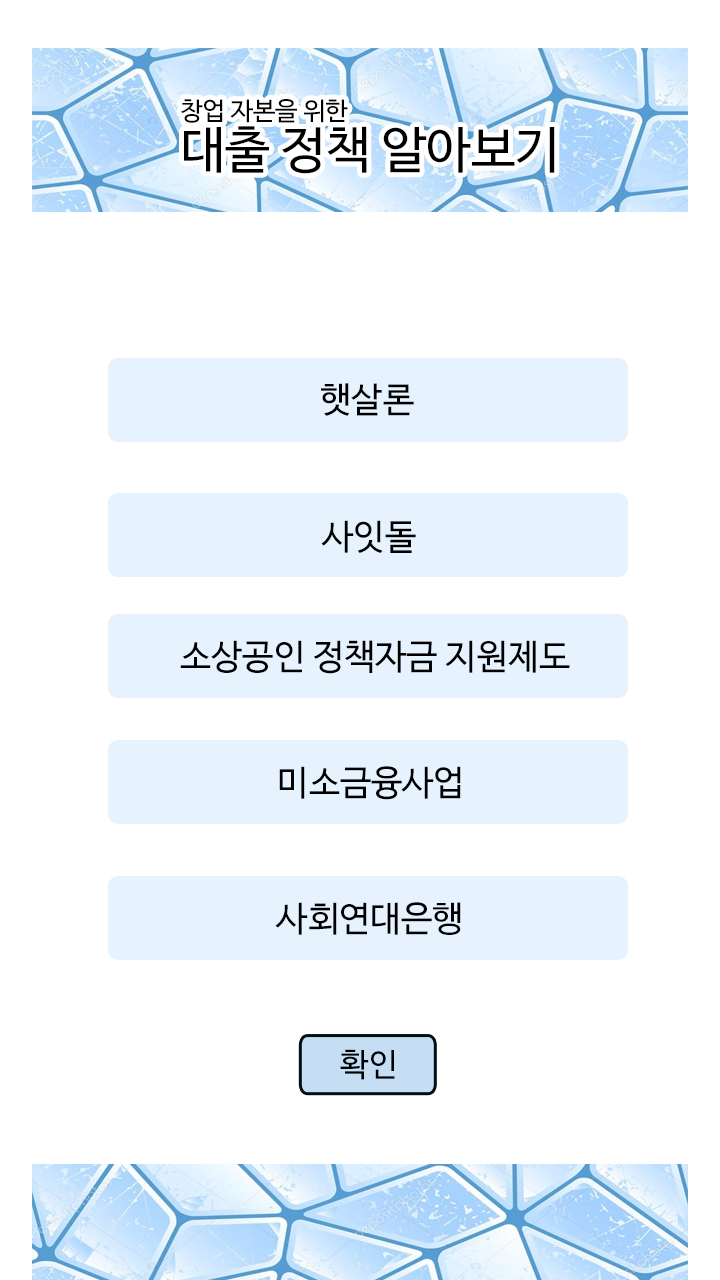
<style>
.page{position:relative;width:720px;height:1280px;background:#ffffff}
.page>*{position:absolute;margin:0}
.t1{font:50px/26px "NanumBarunGothic";color:#000000}
.t2{font:25px/26px "NanumBarunGothic";color:#000000}
.t3{font:35px "NanumBarunGothic";color:#000000}
.t4{font:32px "NanumBarunGothic";color:#000000}
</style>
<div class="page">
<p class="t1" style="left:181px;top:99px;width:374px;height:75px;text-align:center"><span class="t2">창업 자본을 위한<br></span>                   대출 정책 알아보기</p>
<p class="t3" style="left:321px;top:383px;width:93px;height:33px">햇살론</p>
<p class="t3" style="left:321px;top:520px;width:95px;height:33px">사잇돌</p>
<p class="t3" style="left:180px;top:640px;width:390px;height:34px">소상공인 정책자금 지원제도</p>
<p class="t3" style="left:279px;top:766px;width:182px;height:34px">미소금융사업</p>
<p class="t3" style="left:275px;top:902px;width:186px;height:33px">사회연대은행</p>
<p class="t4" style="left:340px;top:1049px;width:55px;height:31px">확인</p>
</div>
